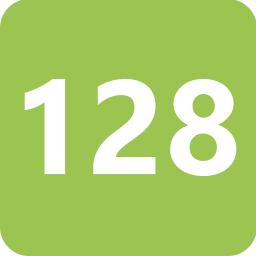
<style>
.page{position:relative;width:256px;height:256px;background:#9cc451}
.page>*{position:absolute;margin:0}
.t1{font:133.3px "LeelawadeeUI-Bold";color:#ffffff}
</style>
<div class="page">
<p class="t1" style="left:24px;top:79px;width:213px;height:97px">128</p>
</div>
